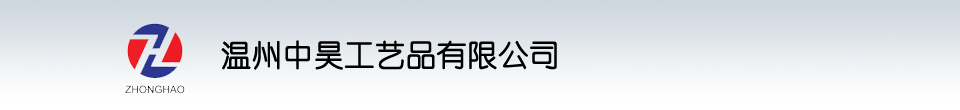
<style>
.page{position:relative;width:960px;height:110px}
.page>*{position:absolute;margin:0}
.t1{font:30px "YouYuan";color:#000000;font-weight:bold}
</style>
<div class="page">
<p class="t1" style="left:221px;top:40px;width:336px;height:30px">温州中昊工艺品有限公司</p>
</div>
